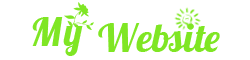
<style>
.page{position:relative;width:250px;height:60px;background:#ffffff}
.page>*{position:absolute;margin:0}
.t1{font:40px "Lobster-Regular";letter-spacing:0.05em;color:#7fe624}
.t2{font:40px "Lobster-Regular";color:#7fe624}
</style>
<div class="page">
<p class="t1" style="left:32px;top:17px;width:51px;height:39px">My</p>
<p class="t2" style="left:98px;top:23px;width:122px;height:29px">Website</p>
</div>
